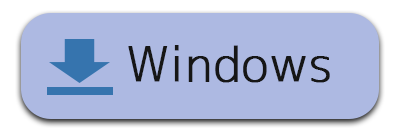
<style>
.page{position:relative;width:400px;height:132px;background:#adb9e2}
.page>*{position:absolute;margin:0}
.t1{font:48px "Koku-Gothic-Light";color:#161616;font-weight:bold}
</style>
<div class="page">
<p class="t1" style="left:128px;top:45px;width:202px;height:38px">Windows</p>
</div>
